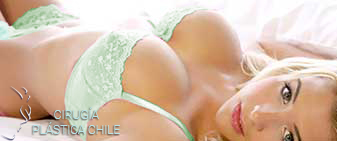
<style>
.page{position:relative;width:337px;height:141px}
.page>*{position:absolute;margin:0}
.t1{font:12px "Roboto-Thin";color:#b9e3e6}
</style>
<div class="page">
<p class="t1" style="left:33px;top:107px;width:87px;height:27px;text-align:center">CIRUGÍA<br>PLÁSTICA CHILE</p>
</div>
